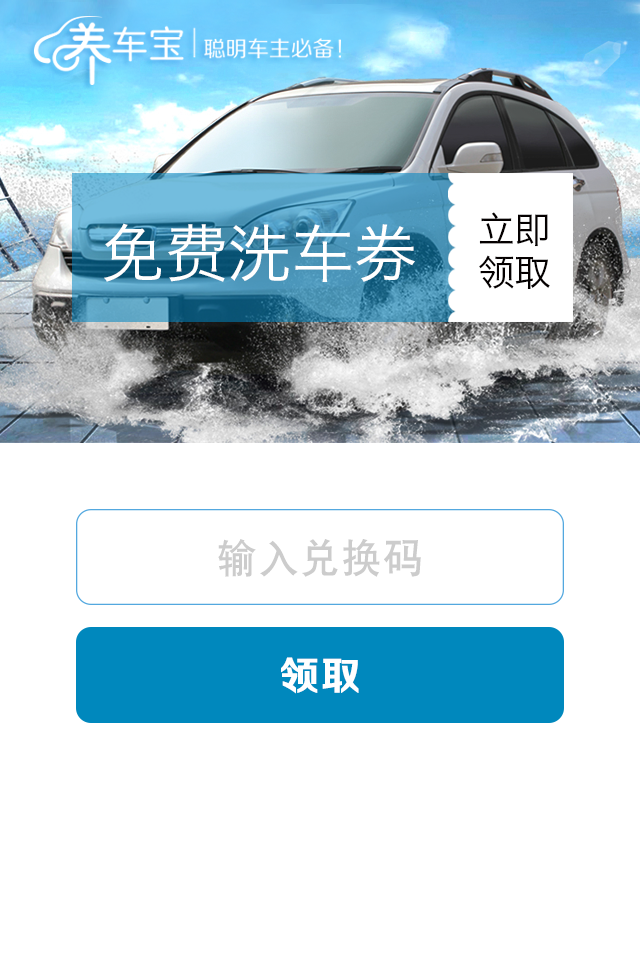
<style>
.page{position:relative;width:640px;height:961px;background:#ffffff}
.page>*{position:absolute;margin:0}
.t1{font:36.5px "HiraginoSansGB-W3";color:#040000}
.t2{font:63px "HiraginoSansGB-W3";color:#ffffff}
.t3{font:39.4px "SIL-Hei-Med-Jian";letter-spacing:0.05em;color:#cccccc}
.t4{font:39.4px "FZZCHJW--GB1-0";letter-spacing:0.05em;color:#ffffff}
</style>
<div class="page">
<p class="t1" style="left:479px;top:212px;width:69px;height:35px">立即</p>
<p class="t2" style="left:104px;top:223px;width:311px;height:59px">免费洗车券</p>
<p class="t1" style="left:479px;top:255px;width:71px;height:34px">领取</p>
<p class="t3" style="left:218px;top:539px;width:203px;height:38px">输入兑换码</p>
<p class="t4" style="left:281px;top:657px;width:78px;height:37px">领取</p>
</div>
